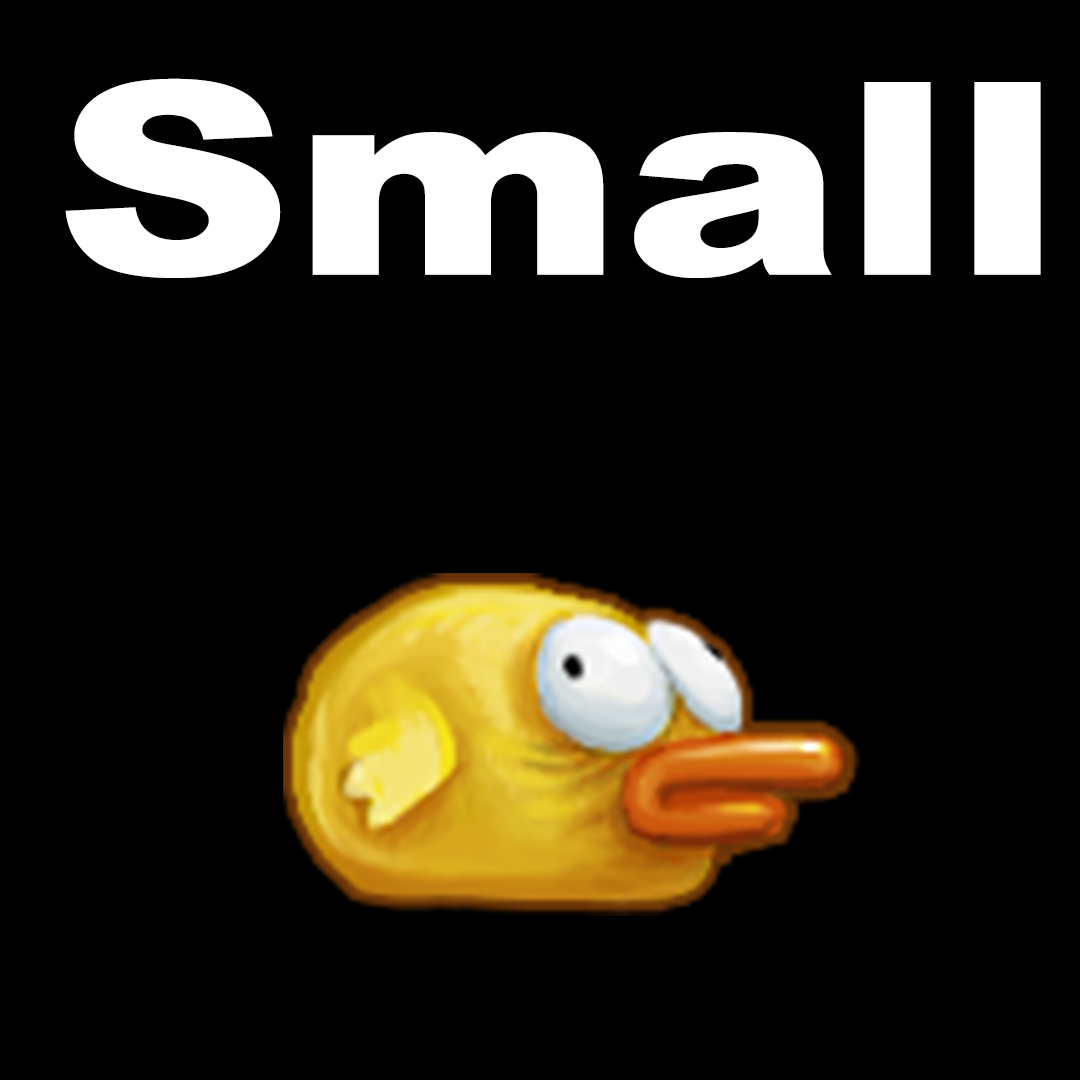
<style>
.page{position:relative;width:1080px;height:1080px;background:#000000}
.page>*{position:absolute;margin:0}
.t1{font:268.7px "Arial-Black";color:#ffffff;scale:1.23 1}
</style>
<div class="page">
<p class="t1" style="left:65px;top:78px;width:976px;height:200px">Small</p>
</div>
